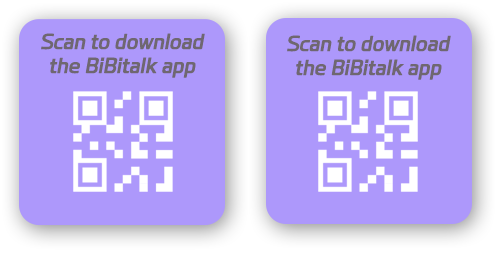
<style>
.page{position:relative;width:498px;height:253px;background:#ad98fb}
.page>*{position:absolute;margin:0}
.t1{font:19px/24px "payboocOTFExtraBold";letter-spacing:-0.01em;color:#6f6770;font-style:italic}
</style>
<div class="page">
<p class="t1" style="left:41px;top:33px;width:164px;height:45px;text-align:center">Scan to download<br>the BiBitalk app</p>
<p class="t1" style="left:287px;top:35px;width:164px;height:45px;text-align:center">Scan to download<br>the BiBitalk app</p>
</div>
